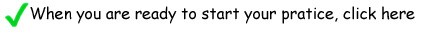
<style>
.page{position:relative;width:428px;height:35px;background:#ffffff}
.page>*{position:absolute;margin:0}
.t1{font:27px "ComicSansMS";color:#000000}
</style>
<div class="page">
<p class="t1" style="left:30px;top:6px;width:385px;height:18px">When you are ready to start your pratice, click here</p>
</div>
